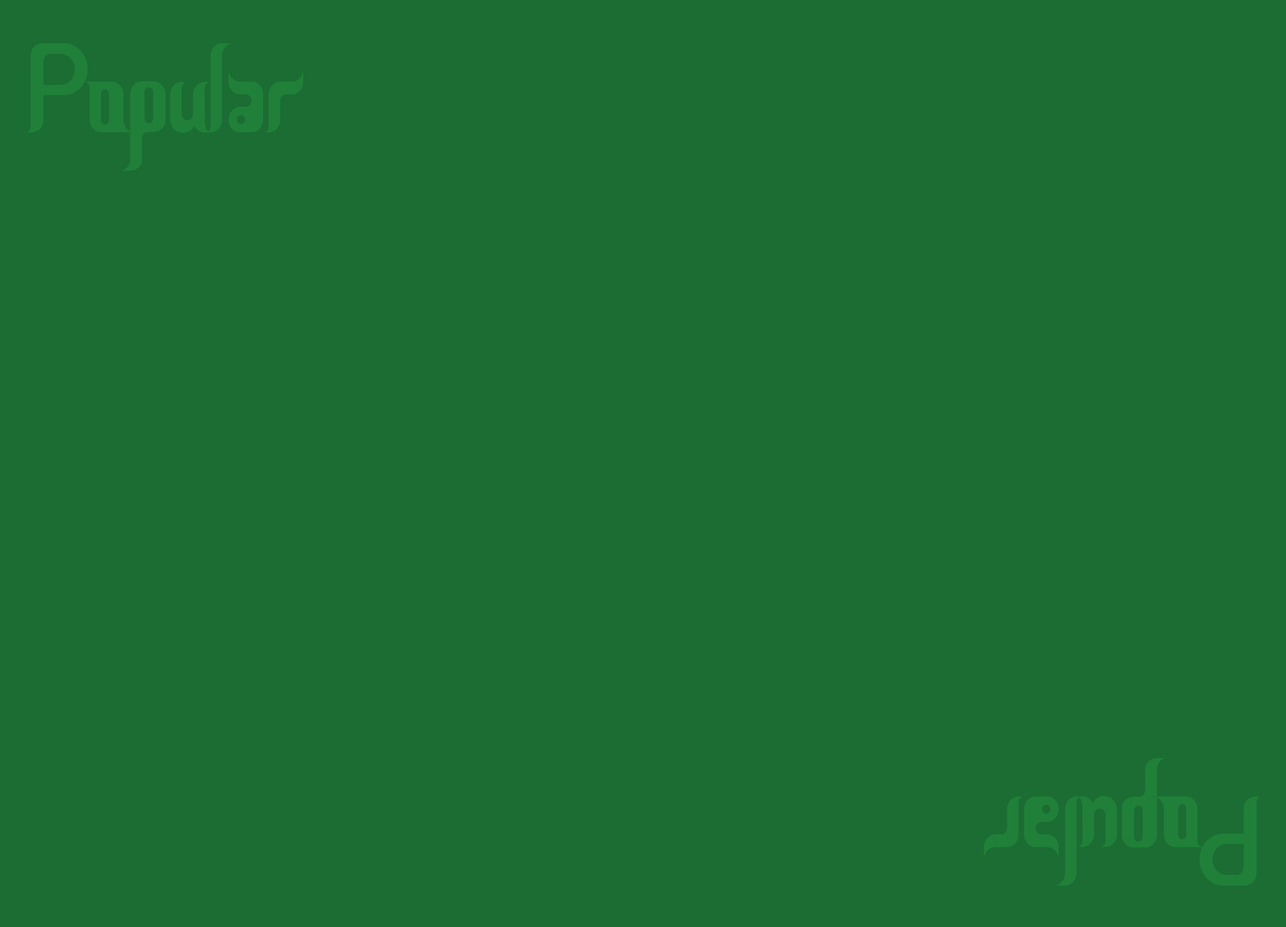
<style>
.page{position:relative;width:1286px;height:927px;background:#1b6d33}
.page>*{position:absolute;margin:0}
.t1{font:127.8px "CeriaLebaran";color:#208039;scale:0.91 1}
</style>
<div class="page">
<p class="t1" style="left:26px;top:43px;width:277px;height:128px">Popular</p>
<p class="t1" style="left:984px;top:758px;width:278px;height:128px;rotate:180deg">Popular</p>
</div>
